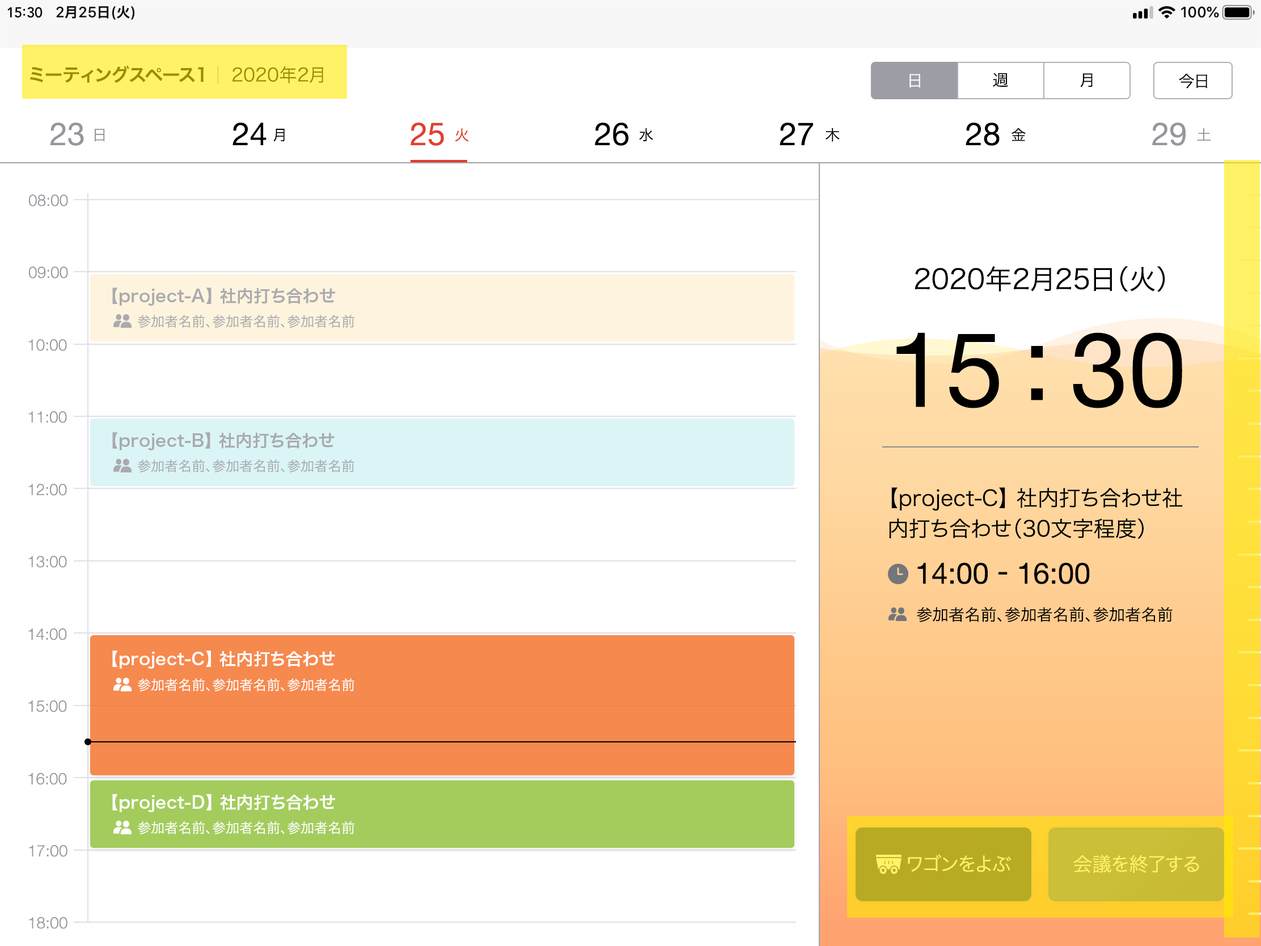
<style>
.page{position:relative;width:1261px;height:946px;background:#ffffff}
.page>*{position:absolute;margin:0}
.t1{font:14.2px "Avenir-Medium";color:#000000}
.t2{font:18.1px "HiraKakuProN-W6";color:#998c00}
.t3{font:18.1px "HiraKakuProN-W3";color:#998c00}
.t4{font:15.9px "HiraKakuProN-W3";color:#fffefe}
.t5{font:15.9px "HiraKakuProN-W3";color:#000000}
.t6{font:31.7px "HelveticaNeue";color:#96969d}
.t7{font:31.7px "HelveticaNeue";color:#000000}
.t8{font:31.7px "HelveticaNeue";color:#e1402f}
.t9{font:14.7px "HiraKakuProN-W3";color:#96969d}
.t10{font:14.7px "HiraKakuProN-W3";color:#000000}
.t11{font:14.7px "HiraKakuProN-W3";color:#e24030}
.t12{font:15.9px "HelveticaNeue-Light";color:#96969d}
.t13{font:27.2px "HiraKakuProN-W3";color:#000000}
.t14{font:17px "HiraKakuProN-W6";color:#aaaaaf}
.t15{font:13.6px "HiraKakuProN-W3";color:#aaaaaf}
.t16{font:104.3px "HelveticaNeue";color:#000000}
.t17{font:21.5px/30.6px "HiraKakuProN-W3";color:#000000}
.t18{font:29.4px "HelveticaNeue";color:#000000}
.t19{font:17px "HiraKakuProN-W6";color:#ffffff}
.t20{font:13.6px "HiraKakuProN-W3";color:#ffffff}
.t21{font:19.3px "HiraKakuProN-W3";color:#fff266}
</style>
<div class="page">
<p class="t1" style="left:7px;top:7px;width:36px;height:11px">15:30</p>
<p class="t2" style="left:30px;top:65px;width:174px;height:18px">ミーティングスペース1</p>
<p class="t3" style="left:232px;top:66px;width:91px;height:17px">2020年2月</p>
<p class="t4" style="left:909px;top:74px;width:11px;height:14px">日</p>
<p class="t4" style="left:909px;top:74px;width:11px;height:14px">日</p>
<p class="t5" style="left:993px;top:73px;width:15px;height:14px">週</p>
<p class="t5" style="left:1080px;top:73px;width:13px;height:14px">月</p>
<p class="t5" style="left:1179px;top:74px;width:28px;height:14px">今日</p>
<p class="t6" style="left:50px;top:122px;width:34px;height:24px">23</p>
<p class="t7" style="left:232px;top:122px;width:34px;height:23px">24</p>
<p class="t8" style="left:410px;top:122px;width:34px;height:24px">25</p>
<p class="t7" style="left:595px;top:122px;width:34px;height:24px">26</p>
<p class="t7" style="left:780px;top:122px;width:33px;height:23px">27</p>
<p class="t7" style="left:966px;top:122px;width:34px;height:24px">28</p>
<p class="t6" style="left:1152px;top:122px;width:34px;height:24px">29</p>
<p class="t9" style="left:94px;top:129px;width:11px;height:13px">日</p>
<p class="t10" style="left:273px;top:129px;width:12px;height:13px">月</p>
<p class="t11" style="left:455px;top:128px;width:14px;height:14px">火</p>
<p class="t10" style="left:639px;top:128px;width:14px;height:13px">水</p>
<p class="t10" style="left:825px;top:128px;width:15px;height:14px">木</p>
<p class="t10" style="left:1011px;top:128px;width:15px;height:13px">金</p>
<p class="t9" style="left:1197px;top:128px;width:13px;height:13px">土</p>
<p class="t12" style="left:28px;top:194px;width:40px;height:12px">08:00</p>
<p class="t12" style="left:28px;top:266px;width:40px;height:12px">09:00</p>
<p class="t13" style="left:915px;top:266px;width:250px;height:25px">2020年2月25日（火）</p>
<p class="t14" style="left:112px;top:287px;width:223px;height:19px">【project-A】 社内打ち合わせ</p>
<p class="t15" style="left:138px;top:315px;width:216px;height:13px">参加者名前、参加者名前、参加者名前</p>
<p class="t12" style="left:28px;top:339px;width:39px;height:12px">10:00</p>
<p class="t16" style="left:896px;top:332px;width:286px;height:76px">15 : 30</p>
<p class="t12" style="left:28px;top:411px;width:39px;height:12px">11:00</p>
<p class="t14" style="left:112px;top:432px;width:223px;height:18px">【project-B】 社内打ち合わせ</p>
<p class="t15" style="left:138px;top:459px;width:216px;height:13px">参加者名前、参加者名前、参加者名前</p>
<p class="t12" style="left:28px;top:484px;width:39px;height:12px">12:00</p>
<p class="t17" style="left:889px;top:487px;width:294px;height:52px">【project-C】 社内打ち合わせ社内打ち合わせ（30文字程度）</p>
<p class="t12" style="left:28px;top:556px;width:39px;height:12px">13:00</p>
<p class="t18" style="left:917px;top:562px;width:173px;height:22px">14:00 - 16:00</p>
<p class="t5" style="left:917px;top:607px;width:255px;height:15px">参加者名前、参加者名前、参加者名前</p>
<p class="t12" style="left:28px;top:628px;width:39px;height:12px">14:00</p>
<p class="t19" style="left:112px;top:650px;width:223px;height:18px">【project-C】 社内打ち合わせ</p>
<p class="t20" style="left:138px;top:678px;width:216px;height:13px">参加者名前、参加者名前、参加者名前</p>
<p class="t12" style="left:28px;top:700px;width:39px;height:12px">15:00</p>
<p class="t12" style="left:28px;top:773px;width:39px;height:12px">16:00</p>
<p class="t19" style="left:112px;top:794px;width:223px;height:18px">【project-D】 社内打ち合わせ</p>
<p class="t20" style="left:138px;top:821px;width:216px;height:13px">参加者名前、参加者名前、参加者名前</p>
<p class="t12" style="left:29px;top:845px;width:38px;height:12px">17:00</p>
<p class="t21" style="left:908px;top:854px;width:103px;height:18px">ワゴンをよぶ</p>
<p class="t21" style="left:1073px;top:854px;width:126px;height:19px">会議を終了する</p>
<p class="t12" style="left:29px;top:917px;width:38px;height:12px">18:00</p>
</div>
